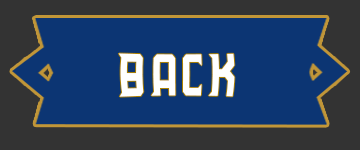
<style>
.page{position:relative;width:360px;height:150px;background:#0c3573}
.page>*{position:absolute;margin:0}
.t1{font:62.5px "Lorde-Havana";letter-spacing:0.1em;color:#ffffff;scale:0.75 1}
</style>
<div class="page">
<p class="t1" style="left:118px;top:53px;width:117px;height:44px">BACK</p>
</div>
